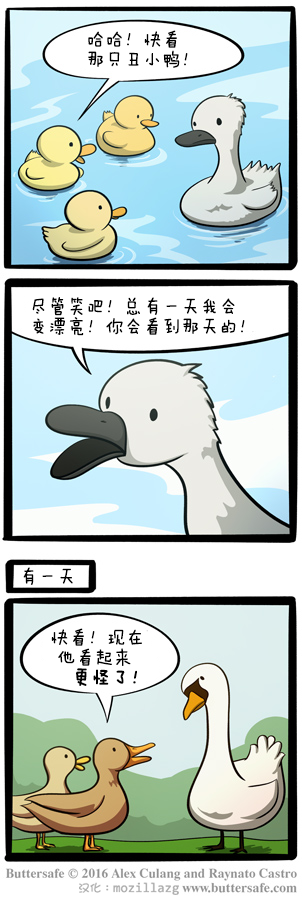
<style>
.page{position:relative;width:302px;height:900px;background:#ffffff}
.page>*{position:absolute;margin:0}
.t1{font:19px/20px "FZMWJW--GB1-0";color:#000000}
.t2{font:19px "FZMWJW--GB1-0";color:#000000}
.t3{font:19px/20px "FZMWJW--GB1-0";color:#000000;font-weight:bold}
</style>
<div class="page">
<p class="t1" style="left:88px;top:30px;width:100px;height:38px">哈哈！快看<br>那只丑小鸭！</p>
<p class="t1" style="left:32px;top:297px;width:213px;height:39px">尽管笑吧！总有一天我会<br>变漂亮！你会看到那天的！</p>
<p class="t2" style="left:23px;top:567px;width:50px;height:18px">有一天</p>
<p class="t1" style="left:51px;top:628px;width:91px;height:58px">快看！现在<br> 他看起来<br><span class="t3">   更怪了！</span></p>
</div>
